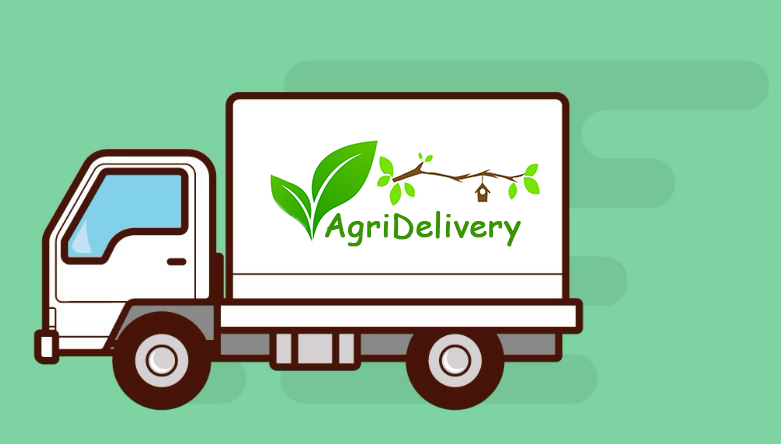
<style>
.page{position:relative;width:781px;height:444px;background:#7dd3a2}
.page>*{position:absolute;margin:0}
.t1{font:32px "ComicSansMS";color:#379600;font-weight:bold}
</style>
<div class="page">
<p class="t1" style="left:325px;top:211px;width:196px;height:36px">AgriDelivery</p>
</div>
